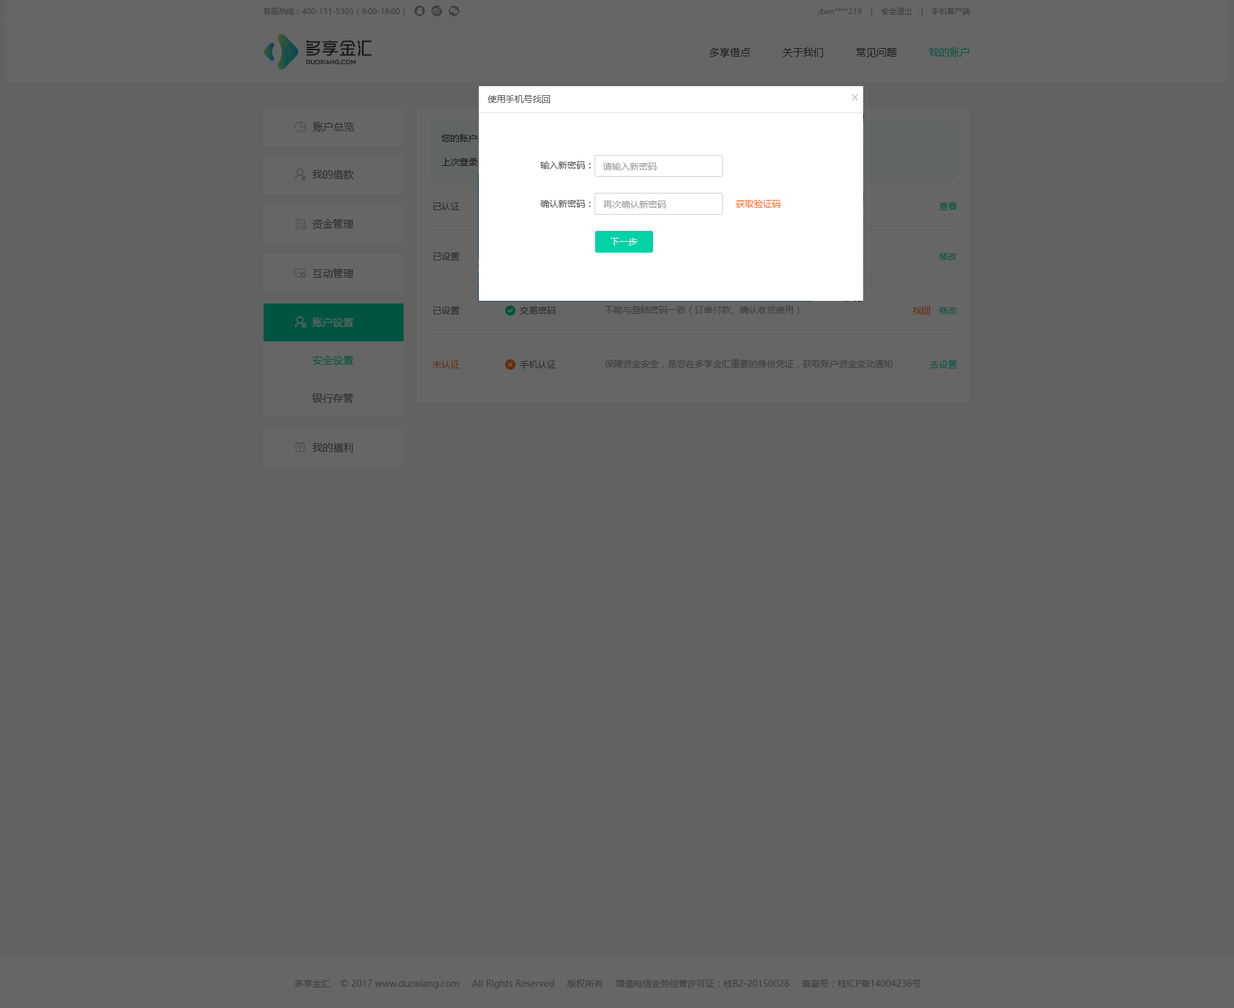
<style>
.page{position:relative;width:1234px;height:1008px;background:#626262}
.page>*{position:absolute;margin:0}
.t1{font:10.3px "MicrosoftYaHei";color:#015442}
.t2{font:9px "MicrosoftYaHei";color:#515151}
.t3{font:10.3px "MicrosoftYaHei";color:#292929}
.t4{font:9px "MicrosoftYaHei";color:#999999}
.t5{font:9px "MicrosoftYaHei";color:#292929}
.t6{font:9px "MicrosoftYaHei";color:#015442}
.t7{font:9px "MicrosoftYaHei";color:#ffffff}
.t8{font:10.3px "MicrosoftYaHei";color:#666666}
.t9{font:9px "MicrosoftYaHei";color:#3d3d3d}
.t10{font:9px "MicrosoftYaHei";color:#662a00}
</style>
<div class="page">
<p class="t1" style="left:929px;top:47px;width:40px;height:10px">我的账户</p>
<p class="t2" style="left:488px;top:95px;width:62px;height:9px">使用手机号找回</p>
<p class="t3" style="left:313px;top:122px;width:41px;height:10px">账户总览</p>
<p class="t2" style="left:541px;top:161px;width:50px;height:8px">输入新密码：</p>
<p class="t3" style="left:312px;top:170px;width:42px;height:9px">我的借款</p>
<p class="t4" style="left:603px;top:163px;width:54px;height:7px">请输入新密码</p>
<p class="t5" style="left:433px;top:203px;width:27px;height:7px">已认证</p>
<p class="t2" style="left:540px;top:200px;width:51px;height:8px">确认新密码：</p>
<p class="t4" style="left:604px;top:201px;width:62px;height:7px">再次确认新密码</p>
<p class="t6" style="left:939px;top:203px;width:18px;height:7px">查看</p>
<p class="t3" style="left:312px;top:219px;width:42px;height:10px">资金管理</p>
<p class="t7" style="left:611px;top:238px;width:27px;height:8px">下一步</p>
<p class="t5" style="left:433px;top:253px;width:27px;height:7px">已设置</p>
<p class="t6" style="left:939px;top:253px;width:18px;height:7px">修改</p>
<p class="t3" style="left:312px;top:269px;width:42px;height:9px">互动管理</p>
<p class="t8" style="left:312px;top:317px;width:42px;height:10px">账户设置</p>
<p class="t5" style="left:433px;top:307px;width:27px;height:7px">已设置</p>
<p class="t5" style="left:520px;top:307px;width:36px;height:7px">交易密码</p>
<p class="t9" style="left:605px;top:306px;width:195px;height:8px">不能与登陆密码一致（订单付款、确认收货使用）</p>
<p class="t10" style="left:913px;top:307px;width:17px;height:8px">找回</p>
<p class="t6" style="left:939px;top:307px;width:18px;height:7px">修改</p>
<p class="t1" style="left:312px;top:356px;width:42px;height:9px">安全设置</p>
<p class="t10" style="left:433px;top:361px;width:27px;height:7px">未认证</p>
<p class="t5" style="left:520px;top:361px;width:36px;height:7px">手机认证</p>
<p class="t9" style="left:605px;top:359px;width:288px;height:9px">保障资金安全，是您在多享金汇重要的身份凭证，获取账户资金变动通知</p>
<p class="t6" style="left:930px;top:361px;width:27px;height:7px">去设置</p>
<p class="t3" style="left:312px;top:393px;width:42px;height:10px">银行存管</p>
<p class="t3" style="left:312px;top:443px;width:41px;height:10px">我的福利</p>
</div>
